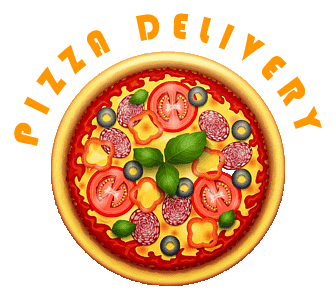
<style>
.page{position:relative;width:335px;height:298px;background:#ffffff}
.page>*{position:absolute;margin:0}
.t1{font:37.5px "Bauhaus93";letter-spacing:0.4em;color:#ff9800;scale:0.53 1}
</style>
<div class="page">
<p class="t1" style="left:14px;top:13px;width:308px;height:133px">PIZZA DELIVERY</p>
</div>
